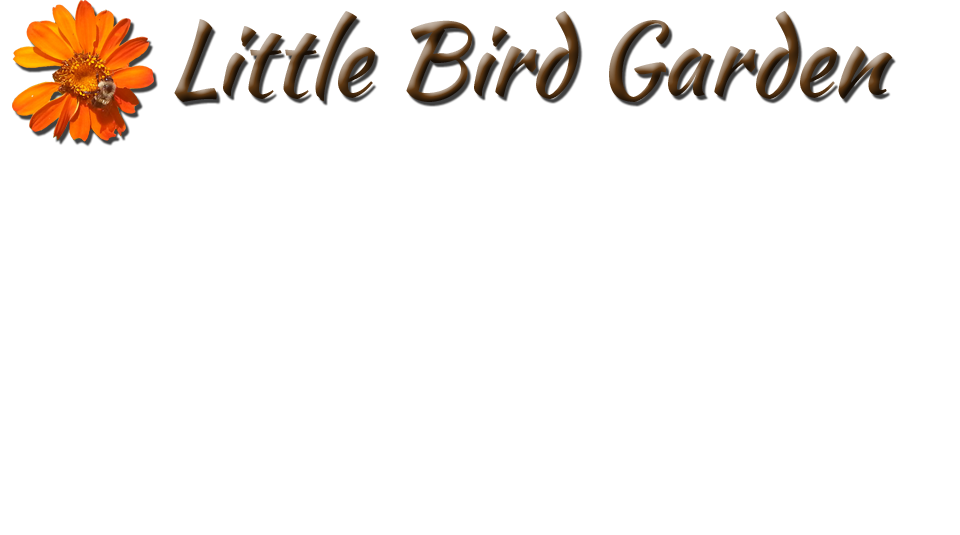
<style>
.page{position:relative;width:960px;height:535px;background:#ffffff}
.page>*{position:absolute;margin:0}
.t1{font:100px "KaushanScript-Regular"}
</style>
<div class="page">
<p class="t1" style="left:174px;top:11px;width:719px;height:91px">Little Bird Garden</p>
</div>
